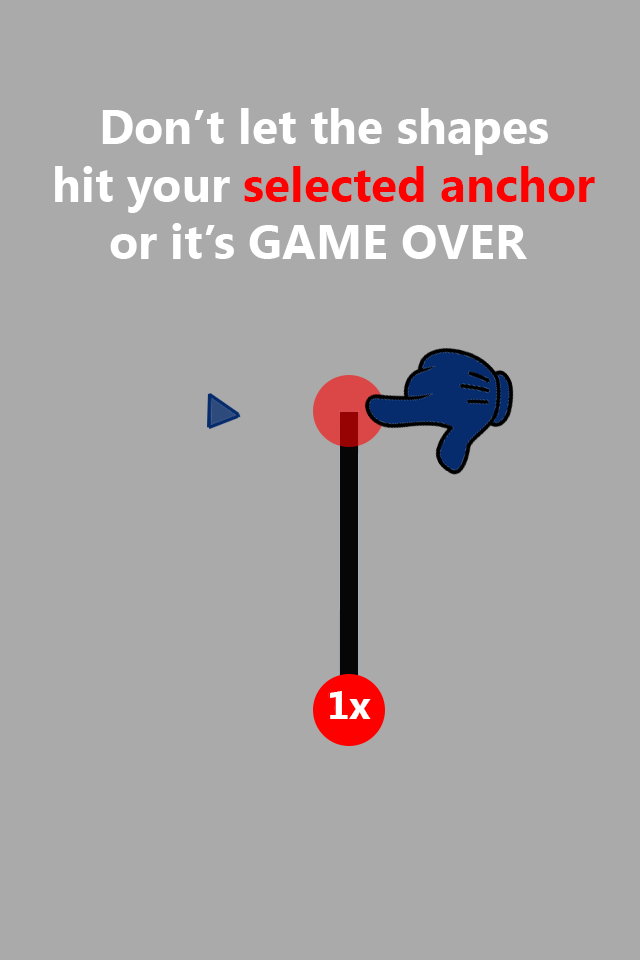
<style>
.page{position:relative;width:640px;height:960px;background:#aaaaaa}
.page>*{position:absolute;margin:0}
.t1{font:48px "LaoUI-Bold";color:#ffffff}
.t2{font:48px "LaoUI-Bold";color:#ff0000}
.t3{font:39.2px "LaoUI-Bold";color:#ffffff}
</style>
<div class="page">
<p class="t1" style="left:55px;top:108px;width:540px;height:151px;text-align:center">Don’t let the shapes<br>hit your <span class="t2">selected anchor</span><br>or it’s GAME OVER</p>
<p class="t3" style="left:330px;top:691px;width:41px;height:28px">1x</p>
</div>
